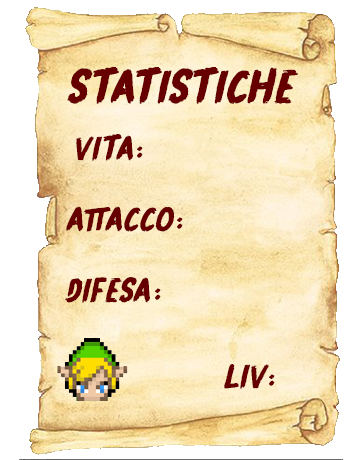
<style>
.page{position:relative;width:360px;height:460px;background:#ffffff}
.page>*{position:absolute;margin:0}
.t1{font:50px "UnknownSecretBoldDEMO-Bold";color:#660000;text-transform:uppercase;font-weight:bold;font-style:italic}
.t2{font:36px "UnknownSecretBoldDEMO-Bold";color:#660000;text-transform:uppercase;font-weight:bold;font-style:italic}
</style>
<div class="page">
<p class="t1" style="left:67px;top:67px;width:231px;height:37px">Statistiche</p>
<p class="t2" style="left:76px;top:134px;width:67px;height:27px">Vita:</p>
<p class="t2" style="left:66px;top:206px;width:117px;height:26px">Attacco:</p>
<p class="t2" style="left:65px;top:277px;width:96px;height:26px">Difesa:</p>
<p class="t2" style="left:224px;top:364px;width:51px;height:25px">Liv:</p>
</div>
